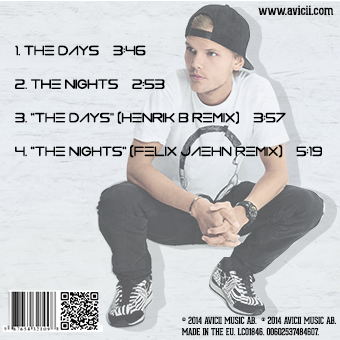
<style>
.page{position:relative;width:340px;height:340px}
.page>*{position:absolute;margin:0}
.t1{font:14px "GearedSlab-Regular";color:#0b0a0b}
.t2{font:14px "VerminVibes2Soft";color:#000000}
.t3{font:9.4px "GearedSlab-Regular";color:#0b0a0b}
</style>
<div class="page">
<p class="t1" style="left:258px;top:5px;width:76px;height:10px">www.avicii.com</p>
<p class="t2" style="left:15px;top:45px;width:307px;height:113px">1. THE DAYS    3:46<br><br>2. THE NIGHTS    2:53<br><br>3. "The Days" (Henrik B Remix)    3:57<br><br>4. "The Nights" (Felix Jaehn Remix)    5:19</p>
<p class="t3" style="left:182px;top:316px;width:154px;height:20px">® 2014 AVICII MUSIC AB.  ® 2014 AVICII MUSIC AB. <br>MADE IN THE EU. LC01846. 00602537484607.</p>
</div>
